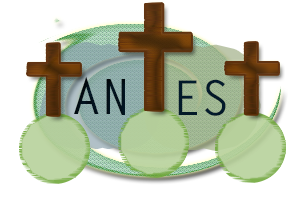
<style>
.page{position:relative;width:300px;height:200px;background:#ffffff}
.page>*{position:absolute;margin:0}
.t1{font:48px "LetterGothicStd-Bold";color:#02101a}
.t2{font:48px "LetterGothicStd-Bold";color:#031a2a}
</style>
<div class="page">
<p class="t1" style="left:74px;top:76px;width:51px;height:39px">AN</p>
<p class="t2" style="left:178px;top:79px;width:48px;height:37px">ES</p>
</div>
